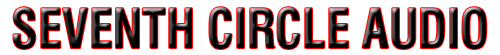
<style>
.page{position:relative;width:500px;height:55px;background:#ffffff}
.page>*{position:absolute;margin:0}
.t1{font:52.8px "Swiss721BT-BoldCondensed";color:#000000;scale:0.93 1}
</style>
<div class="page">
<p class="t1" style="left:13px;top:7px;width:474px;height:42px">SEVENTH CIRCLE AUDIO</p>
</div>
